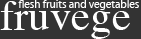
<style>
.page{position:relative;width:141px;height:39px;background:#333333}
.page>*{position:absolute;margin:0}
.t1{font:42.8px "Times-Roman";color:#ffffff}
.t2{font:10.7px "MyriadWebPro";color:#ffffff}
</style>
<div class="page">
<p class="t1" style="left:0px;top:1px;width:130px;height:38px">fruvege</p>
<p class="t2" style="left:18px;top:0px;width:121px;height:10px">flesh fruits and vegetables</p>
</div>
